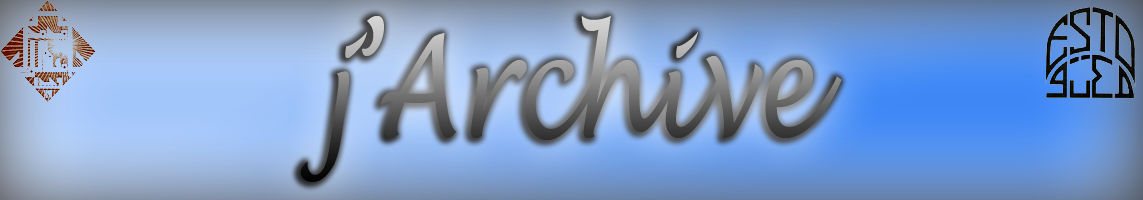
<style>
.page{position:relative;width:1143px;height:200px}
.page>*{position:absolute;margin:0}
.t1{font:139.6px "LucidaHandwriting-Italic";scale:0.74 1}
</style>
<div class="page">
<p class="t1" style="left:300px;top:16px;width:542px;height:166px">j’Archive</p>
</div>
